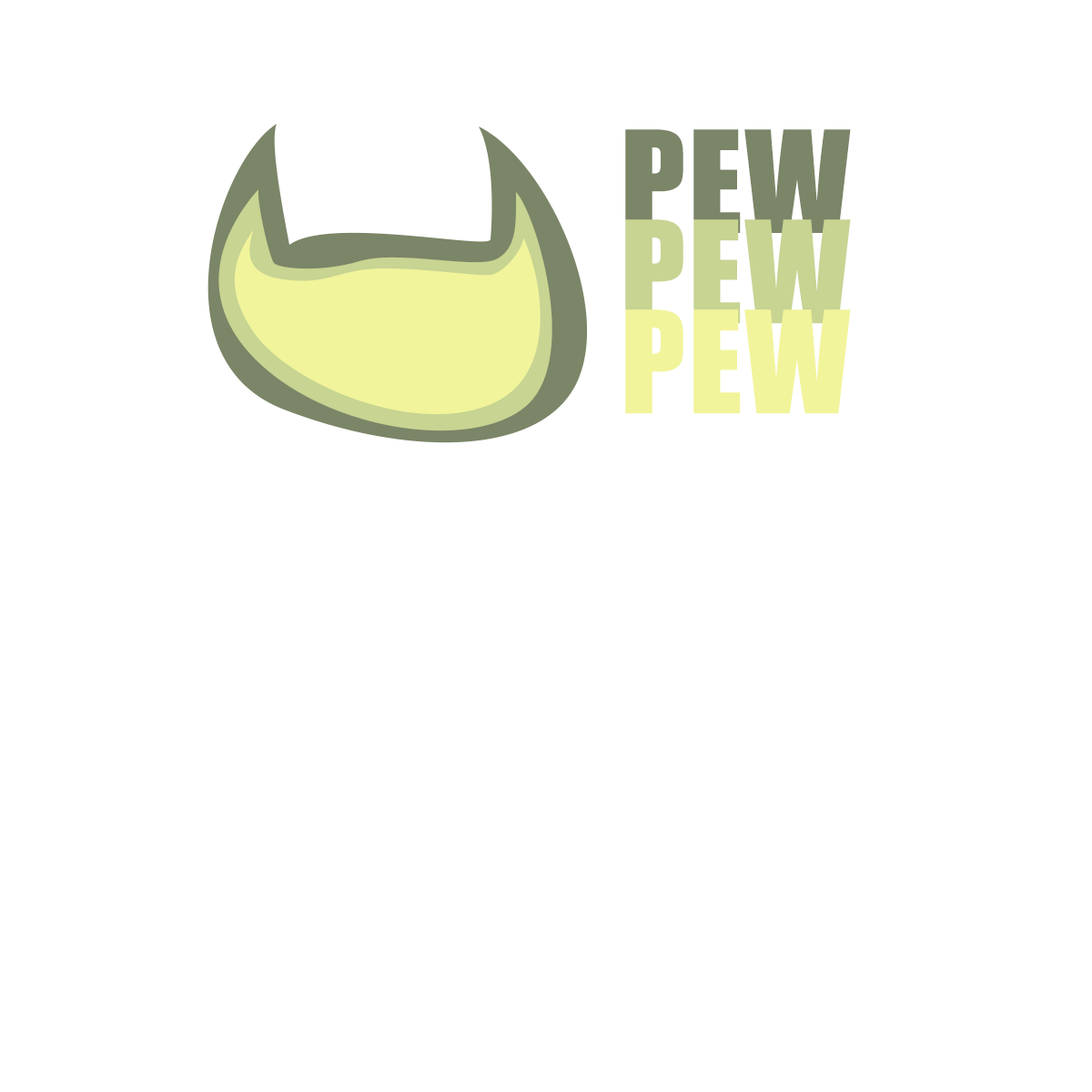
<style>
.page{position:relative;width:1092px;height:1092px;background:#ffffff}
.page>*{position:absolute;margin:0}
.t1{font:131px/90.1px "Impact";letter-spacing:0.02em;color:#7b8567}
.t2{font:131px/90.1px "Impact";letter-spacing:0.02em;color:#c7d492}
.t3{font:131px/90.1px "Impact";letter-spacing:0.02em;color:#f2f49b}
</style>
<div class="page">
<p class="t1" style="left:625px;top:129px;width:226px;height:285px;text-align:center">PEW<br><span class="t2">PEW<br></span><span class="t3">PEW</span></p>
</div>
